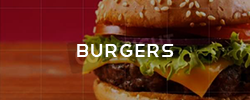
<style>
.page{position:relative;width:250px;height:100px}
.page>*{position:absolute;margin:0}
.t1{font:24px "Telegrafico";color:#ffffff}
</style>
<div class="page">
<p class="t1" style="left:77px;top:44px;width:97px;height:13px">Burgers</p>
</div>
